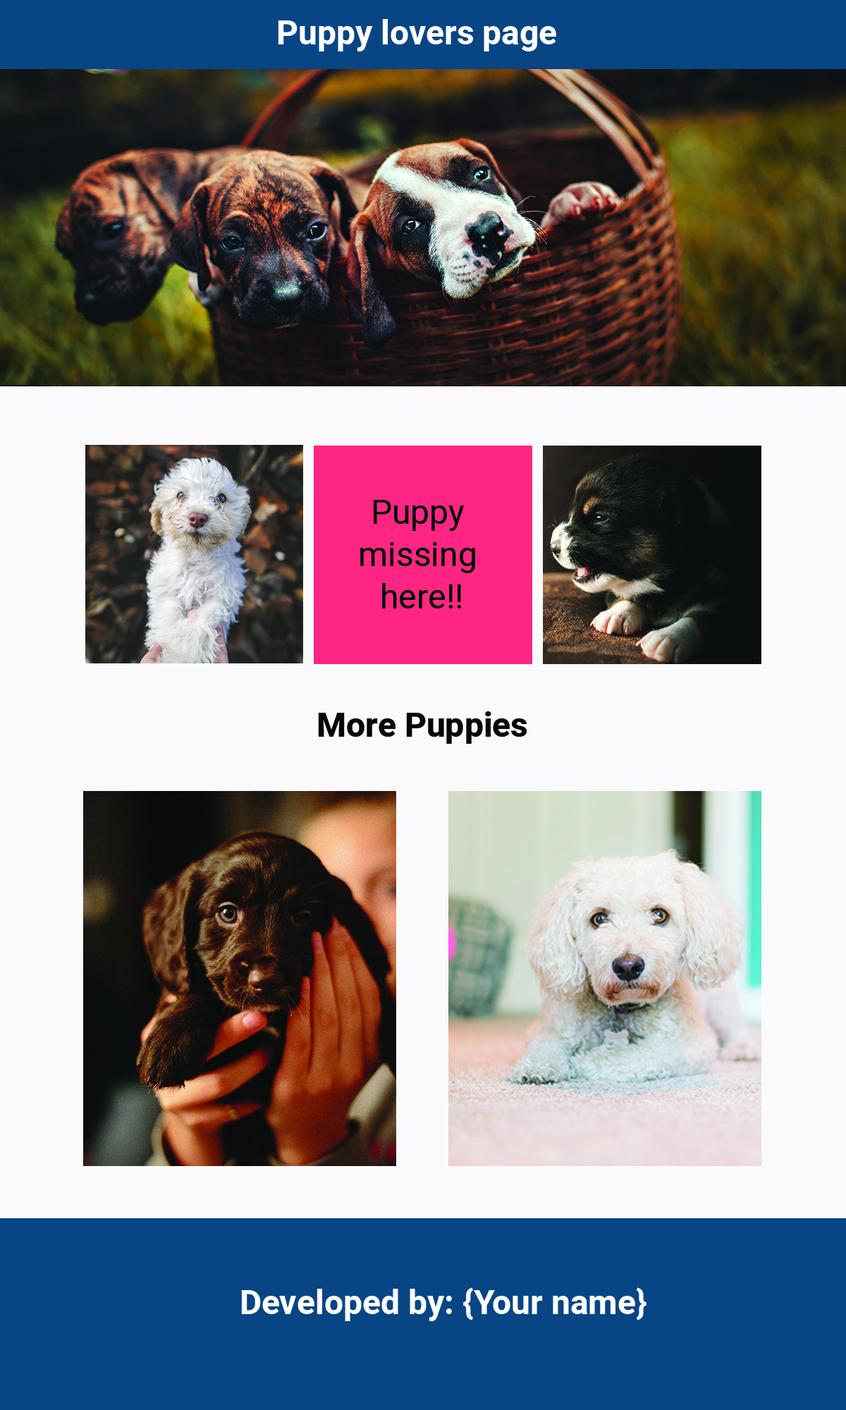
<style>
.page{position:relative;width:846px;height:1410px;background:#fafafc}
.page>*{position:absolute;margin:0}
.t1{font:33.8px "Heebo-Bold";color:#ffffff}
.t2{font:33.8px/42.3px "Heebo-Regular";color:#060808}
.t3{font:33.8px "Heebo-Bold";color:#060808}
</style>
<div class="page">
<p class="t1" style="left:278px;top:19px;width:278px;height:32px">Puppy lovers page</p>
<p class="t2" style="left:360px;top:500px;width:115px;height:108px;text-align:center">Puppy <br>missing <br>here!!</p>
<p class="t3" style="left:318px;top:711px;width:209px;height:33px">More Puppies</p>
<p class="t1" style="left:241px;top:1287px;width:405px;height:34px">Developed by: {Your name}</p>
</div>
